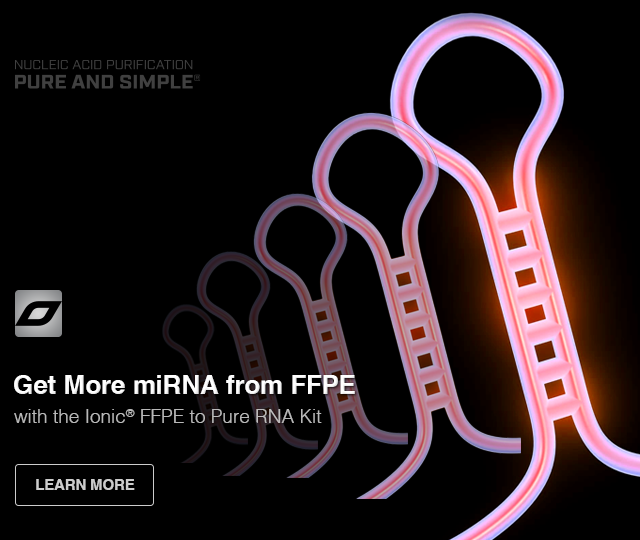
<style>
.page{position:relative;width:640px;height:540px;background:#000000}
.page>*{position:absolute;margin:0}
.t1{font:26px "Helvetica-Bold";color:#fefefe}
.t2{font:19px "Helvetica-Light";color:#b8b8b8}
.t3{font:19px "Helvetica-Light";color:#b8b8b8;text-transform:uppercase}
.t4{font:15px "Helvetica-Bold";letter-spacing:-0.01em;color:#cccccc;text-transform:uppercase}
</style>
<div class="page">
<p class="t1" style="left:14px;top:375px;width:341px;height:19px">Get More miRNA from FFPE</p>
<p class="t2" style="left:14px;top:409px;width:308px;height:14px">with the Ionic<span class="t3">®</span> FFPE to Pure RNA Kit</p>
<p class="t4" style="left:36px;top:479px;width:99px;height:11px">Learn More</p>
</div>
